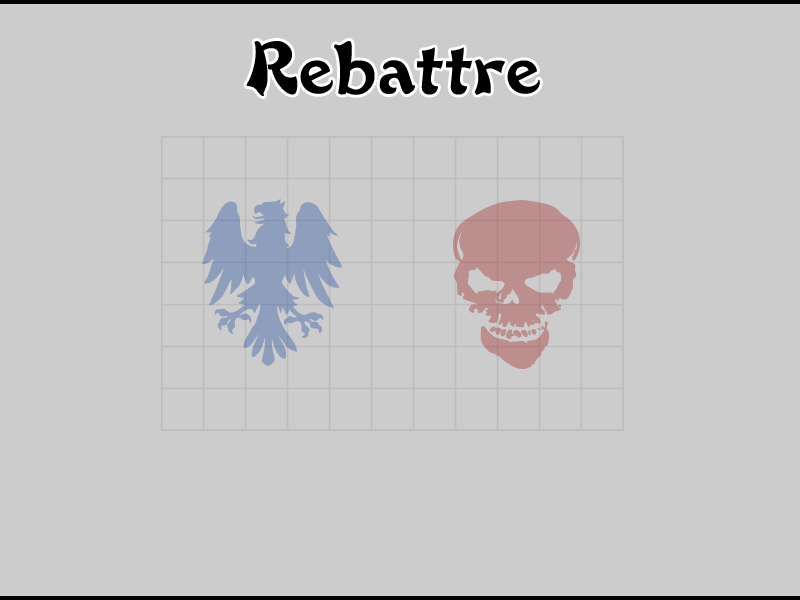
<style>
.page{position:relative;width:800px;height:600px;background:#cccccc}
.page>*{position:absolute;margin:0}
.t1{font:72px "French-Grotesque";color:#000000}
</style>
<div class="page">
<p class="t1" style="left:246px;top:41px;width:294px;height:55px">Rebattre</p>
</div>
